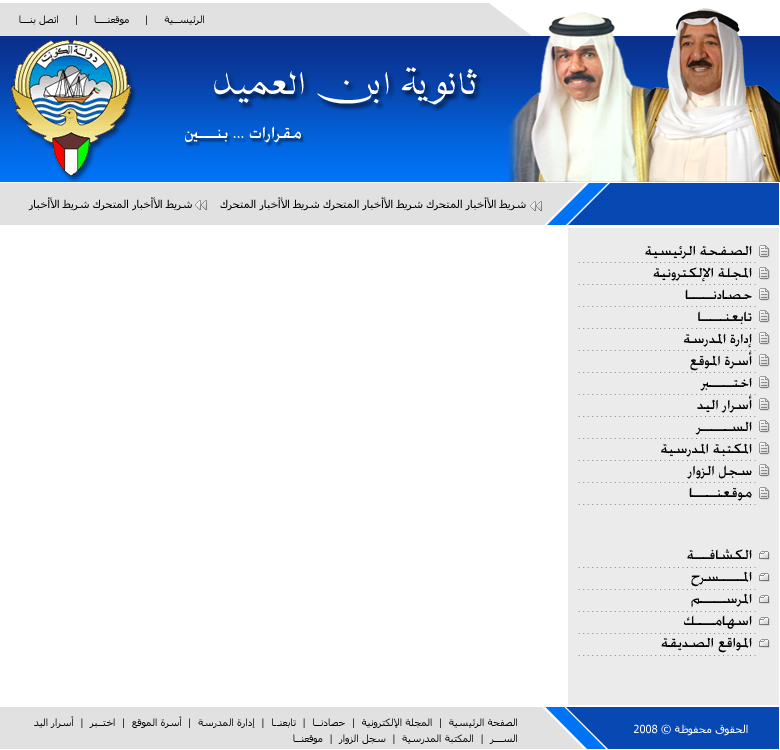
<style>
.page{position:relative;width:780px;height:750px;background:#ffffff}
.page>*{position:absolute;margin:0}
.t1{font:10px "Tahoma";color:#000000}
.t2{font:41.9px "MCS-Nask-S_U-normal.";color:#ffffff}
.t3{font:19.4px "AdvertisingMedium";color:#fffefe}
.t4{font:11px "Tahoma";color:#000000}
.t5{font:16px/22px "AdvertisingMedium";color:#000000}
.t6{font:10px/16px "Tahoma";color:#000000}
.t7{font:11px "Tahoma";color:#ffffff}
</style>
<div class="page">
<p class="t1" style="left:19px;top:15px;width:185px;height:10px">الرئيســية     |     موقعنــــا     |     اتصل بنـــا</p>
<p class="t2" style="left:214px;top:67px;width:263px;height:38px">ثانوية ابن العميد</p>
<p class="t3" style="left:185px;top:126px;width:116px;height:17px">مقرارات ... بنـــين</p>
<p class="t4" style="left:28px;top:197px;width:498px;height:14px">شريط الأأخبار المتحرك شريط الأأخبار المتحرك شريط الأأخبار المتحرك        شريط الأأخبار المتحرك شريط الأأخبار</p>
<p class="t5" style="left:645px;top:245px;width:107px;height:256px">الصفحة الرئيسية<br>المجلة الإلكترونية<br>حصادنـــــا<br>تابعنـــــا<br>إدارة المدرسة<br>أسرة الموقع<br>اختـــــبر<br>أسرار اليد<br>الســــــر<br>المكتبة المدرسية<br>سجل الزوار<br>موقعنـــــا</p>
<p class="t5" style="left:661px;top:549px;width:91px;height:104px">الكشافـــة<br>المـــــسرح<br>المرســـــم<br>اسهامــــك<br>المواقع الصديقة</p>
<p class="t6" style="left:34px;top:716px;width:483px;height:28px">الصفحة الرئيسية  |  المجلة الإلكترونية  |  حصادنــا  |  تابعنــا  |  إدارة المدرسة  |  أسرة الموقع  |  اختــبر  |  أسرار اليد  <br>الســـر  |  المكتبة المدرسية  |  سجل الزوار  |  موقعنــا</p>
<p class="t7" style="left:634px;top:724px;width:114px;height:12px">الحقوق محفوظة © 2008</p>
</div>
